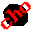
<style>
.page{position:relative;width:32px;height:32px;background:#ffffff}
.page>*{position:absolute;margin:0}
.t1{font:25px "DOSMyungjo";color:#ff0000}
</style>
<div class="page">
<p class="t1" style="left:0px;top:1px;width:32px;height:29px;rotate:-42deg">cho</p>
</div>
